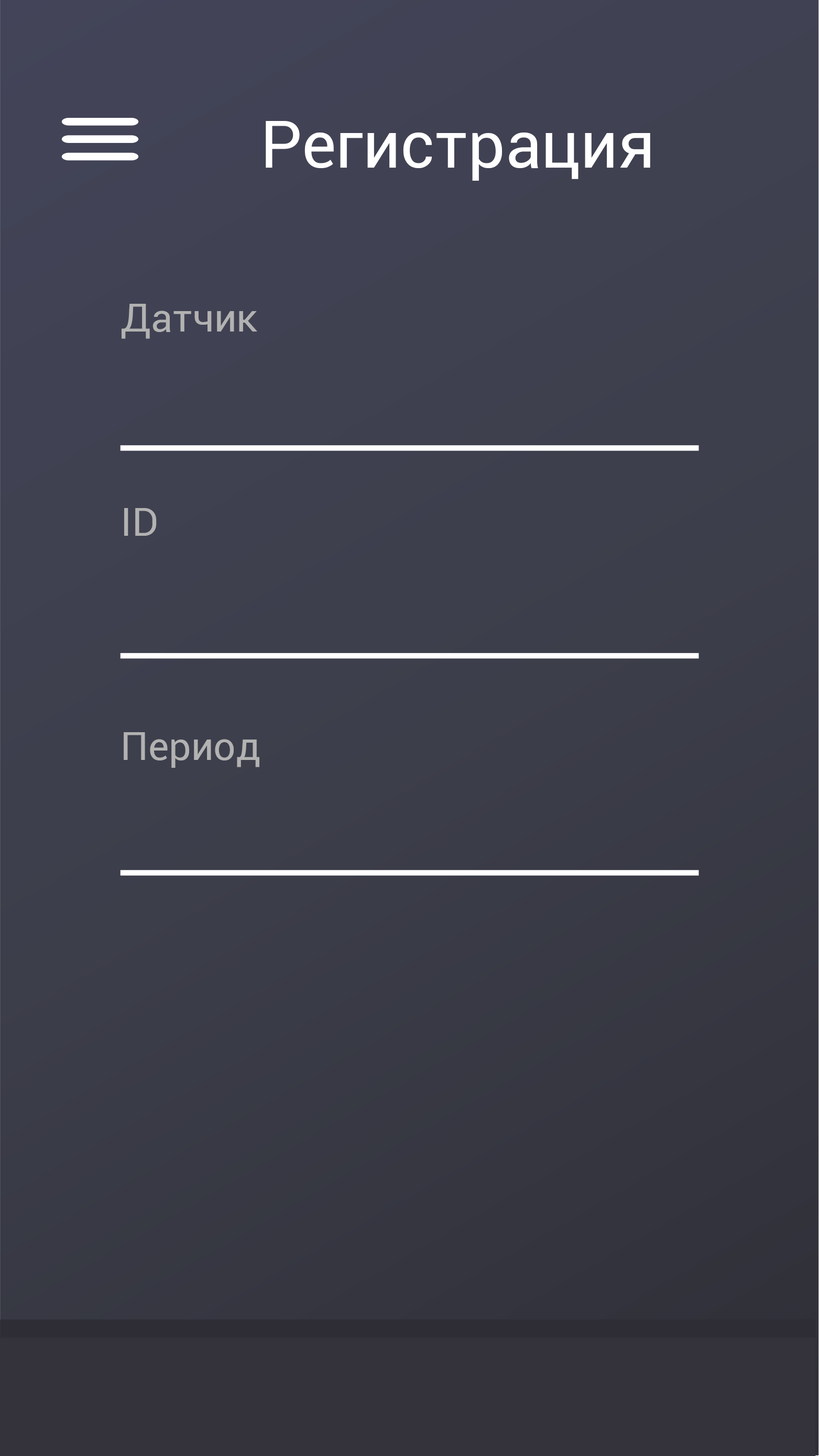
<style>
.page{position:relative;width:819px;height:1456px}
.page>*{position:absolute;margin:0}
.t1{font:65.5px "Roboto-Regular";color:#ffffff}
.t2{font:39.3px "Roboto-Regular";color:#b3b3b3}
</style>
<div class="page">
<p class="t1" style="left:266px;top:121px;width:384px;height:60px">Регистрация</p>
<p class="t2" style="left:122px;top:304px;width:135px;height:35px">Датчик</p>
<p class="t2" style="left:124px;top:508px;width:33px;height:28px">ID</p>
<p class="t2" style="left:124px;top:732px;width:135px;height:36px">Период</p>
</div>
